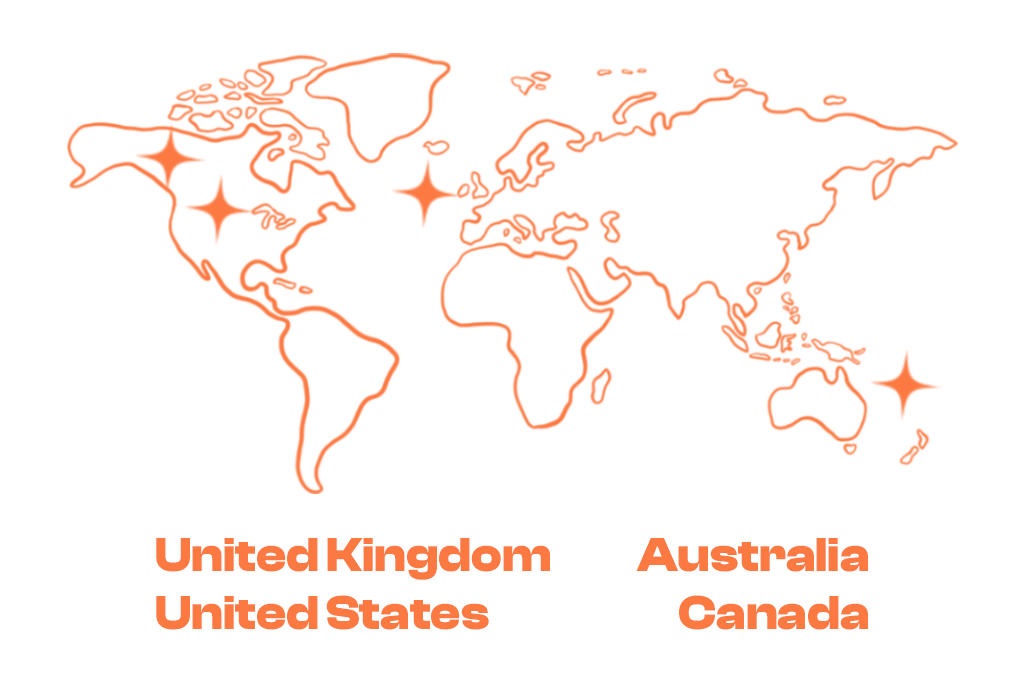
<style>
.page{position:relative;width:1024px;height:700px;background:#ffffff}
.page>*{position:absolute;margin:0}
.t1{font:49.3px "false";color:#fc7942}
</style>
<div class="page">
<p class="t1" style="left:156px;top:538px;width:394px;height:42px">United Kingdom</p>
<p class="t1" style="left:636px;top:538px;width:232px;height:34px">Australia</p>
<p class="t1" style="left:156px;top:595px;width:333px;height:35px">United States</p>
<p class="t1" style="left:679px;top:595px;width:189px;height:35px">Canada</p>
</div>
